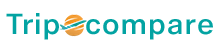
<style>
.page{position:relative;width:220px;height:50px;background:#ffffff}
.page>*{position:absolute;margin:0}
.t1{font:26.6px "HelveticaNowMicro-Medium";color:#02a3a2}
</style>
<div class="page">
<p class="t1" style="left:6px;top:13px;width:53px;height:27px">Trip</p>
<p class="t1" style="left:86px;top:19px;width:127px;height:21px">compare</p>
</div>
